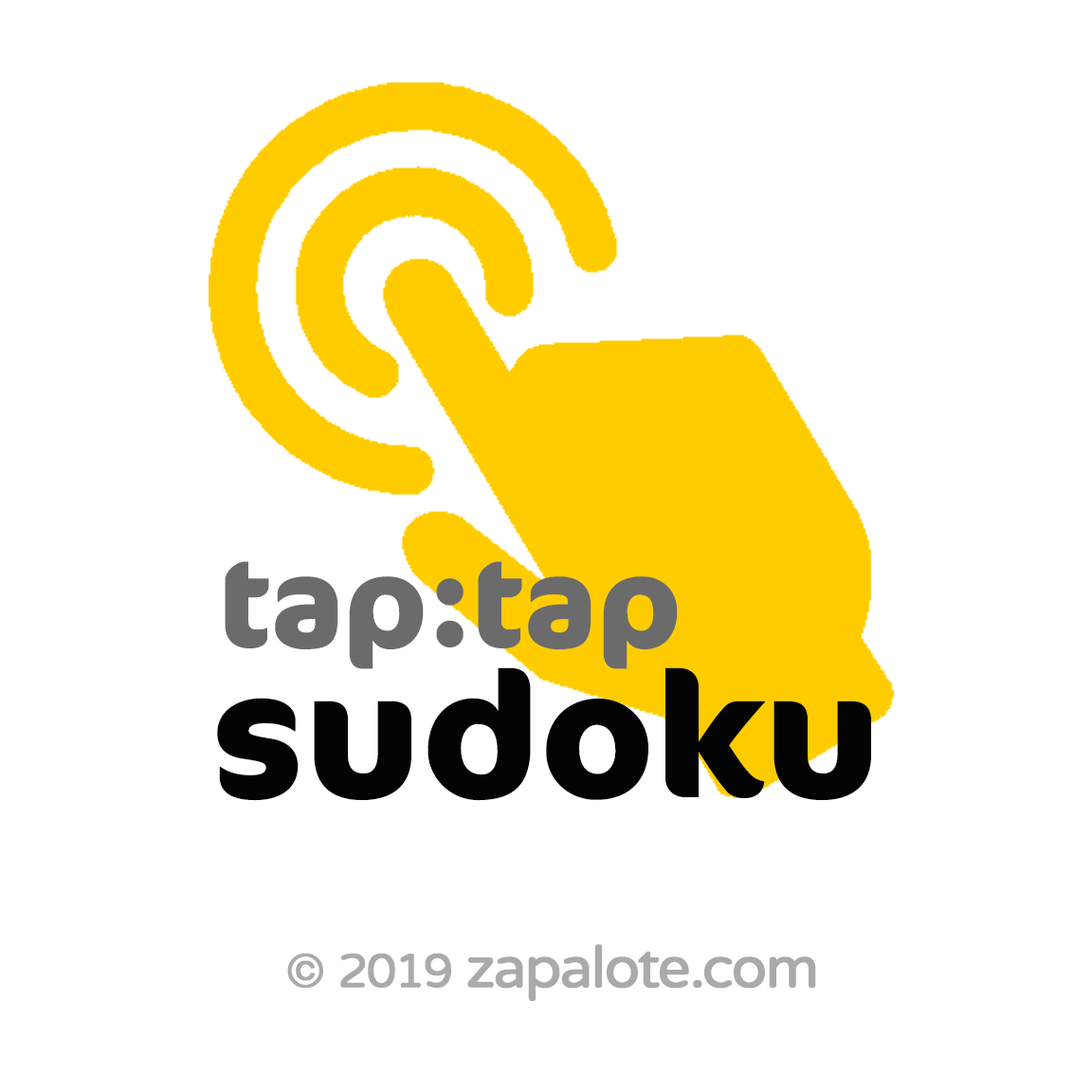
<style>
.page{position:relative;width:1092px;height:1092px;background:#ffffff}
.page>*{position:absolute;margin:0}
.t1{font:125.3px "Cocon-Bold";color:#6b6b6b}
.t2{font:174.7px "Cocon-Bold";color:#030303}
.t3{font:57.8px "VarelaRound-Regular";letter-spacing:-0.05em;color:#aaaaaa;font-weight:bold}
.t4{font:47.4px "VarelaRound-Regular";letter-spacing:-0.05em;color:#aaaaaa;font-weight:bold}
</style>
<div class="page">
<p class="t1" style="left:225px;top:561px;width:453px;height:108px">tap:tap</p>
<p class="t2" style="left:217px;top:667px;width:654px;height:134px">sudoku</p>
<p class="t3" style="left:287px;top:944px;width:529px;height:57px"><span class="t4">© 2019</span> zapalote.com</p>
</div>
